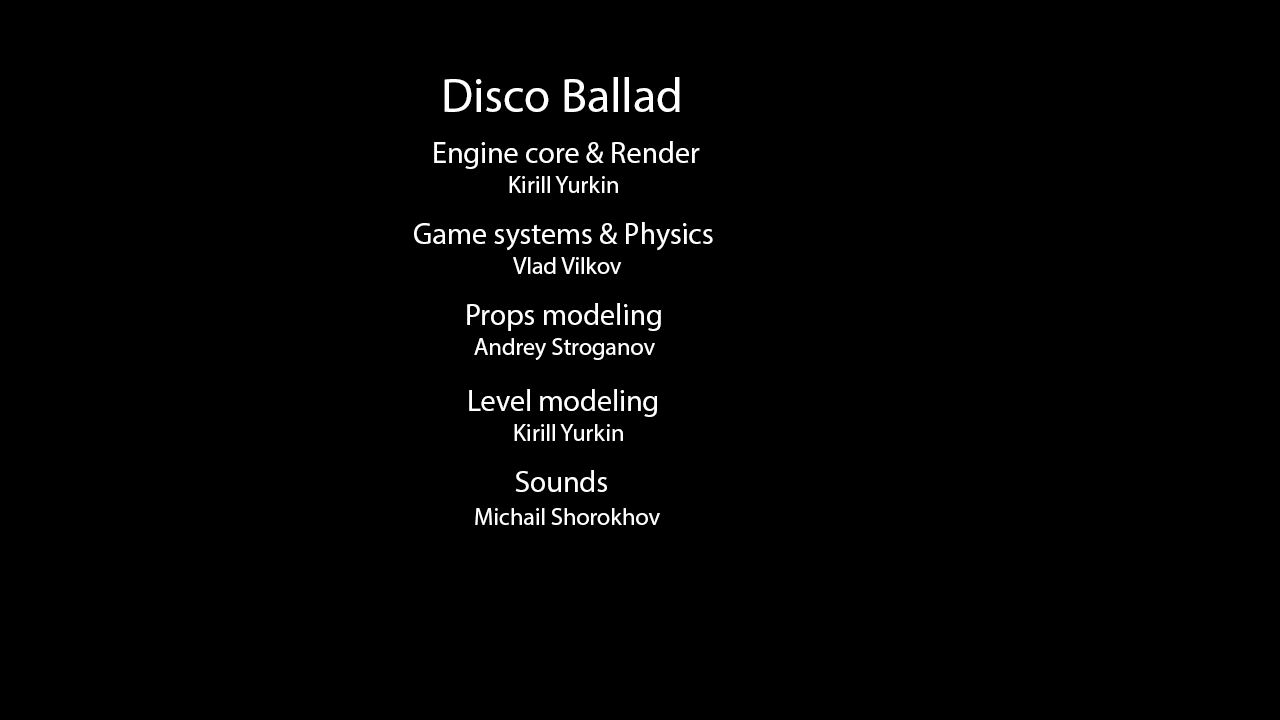
<style>
.page{position:relative;width:1280px;height:720px;background:#000000}
.page>*{position:absolute;margin:0}
.t1{font:48px "MyriadPro-Regular";color:#ffffff}
.t2{font:30px "MyriadPro-Regular";color:#ffffff}
.t3{font:24px "MyriadPro-Regular";color:#ffffff}
</style>
<div class="page">
<p class="t1" style="left:444px;top:77px;width:236px;height:35px">Disco Ballad</p>
<p class="t2" style="left:434px;top:141px;width:266px;height:28px">Engine core &amp; Render</p>
<p class="t3" style="left:509px;top:176px;width:109px;height:17px">Kirill Yurkin</p>
<p class="t2" style="left:414px;top:222px;width:299px;height:29px">Game systems &amp; Physics</p>
<p class="t3" style="left:513px;top:257px;width:109px;height:17px">Vlad Vilkov</p>
<p class="t2" style="left:467px;top:303px;width:194px;height:28px">Props modeling</p>
<p class="t3" style="left:474px;top:338px;width:181px;height:22px">Andrey Stroganov</p>
<p class="t2" style="left:469px;top:389px;width:188px;height:28px">Level modeling</p>
<p class="t3" style="left:514px;top:424px;width:109px;height:17px">Kirill Yurkin</p>
<p class="t2" style="left:515px;top:470px;width:92px;height:22px">Sounds</p>
<p class="t3" style="left:475px;top:508px;width:185px;height:17px">Michail Shorokhov</p>
</div>
